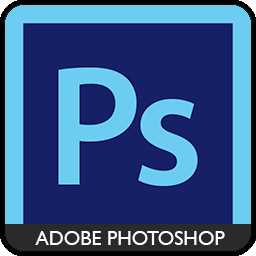
<style>
.page{position:relative;width:256px;height:256px;background:#162067}
.page>*{position:absolute;margin:0}
.t1{font:20px "GillSansMT";color:#ffffff}
</style>
<div class="page">
<p class="t1" style="left:35px;top:231px;width:190px;height:14px">ADOBE PHOTOSHOP</p>
</div>
